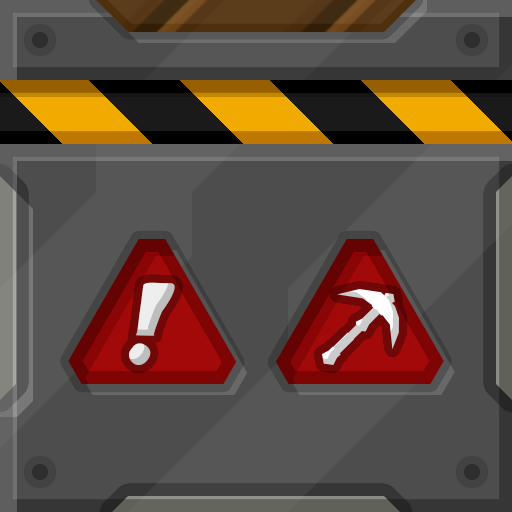
<style>
.page{position:relative;width:512px;height:512px;background:#4d4d4d}
.page>*{position:absolute;margin:0}
.t1{font:114.6px "ComicBook";letter-spacing:0.02em}
</style>
<div class="page">
<p class="t1" style="left:129px;top:282px;width:46px;height:83px">!</p>
</div>
